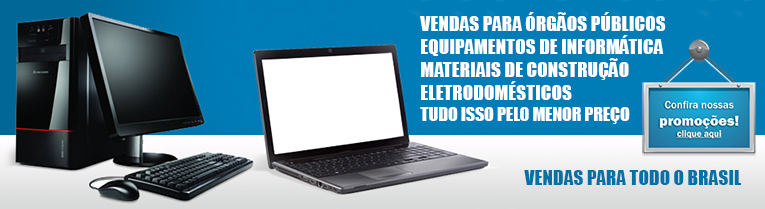
<style>
.page{position:relative;width:765px;height:209px}
.page>*{position:absolute;margin:0}
.t1{font:19.3px "Impact";color:#ffffff}
.t2{font:17.7px "Impact";color:#ffffff}
.t3{font:19.3px "Impact";color:#0072a8}
</style>
<div class="page">
<p class="t1" style="left:420px;top:12px;width:246px;height:112px">VENDAS PARA ÓRGÃOS PÚBLICOS<br>EQUIPAMENTOS DE INFORMÁTICA<br>MATERIAIS DE CONSTRUÇÃO<br>ELETRODOMÉSTICOS<br><span class="t2">TUDO ISSO PELO MENOR PREÇO</span></p>
<p class="t3" style="left:524px;top:170px;width:217px;height:15px">VENDAS PARA TODO O BRASIL</p>
</div>
